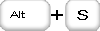
<style>
.page{position:relative;width:100px;height:31px;background:#ffffff}
.page>*{position:absolute;margin:0}
.t1{font:9.9px "ArialMT";color:#000000;scale:1.42 1}
.t2{font:13.2px "ArialMT";color:#000000;scale:1.42 1}
</style>
<div class="page">
<p class="t1" style="left:10px;top:11px;width:15px;height:7px">Alt</p>
<p class="t2" style="left:77px;top:10px;width:11px;height:10px">S</p>
</div>
